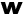
<style>
.page{position:relative;width:23px;height:16px;background:#ffffff}
.page>*{position:absolute;margin:0}
.t1{font:24px "ErasITC-Bold";color:#000000}
</style>
<div class="page">
<p class="t1" style="left:0px;top:2px;width:23px;height:12px">w</p>
</div>
